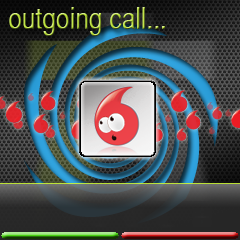
<style>
.page{position:relative;width:240px;height:240px}
.page>*{position:absolute;margin:0}
.t1{font:30px "HelveticaCYPlain"}
</style>
<div class="page">
<p class="t1" style="left:9px;top:7px;width:156px;height:29px">outgoing call...</p>
</div>
